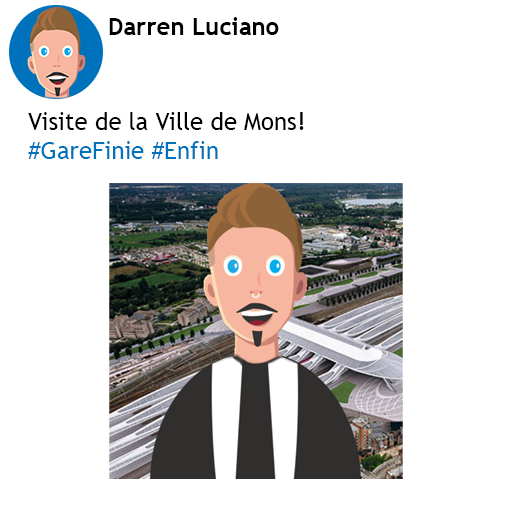
<style>
.page{position:relative;width:512px;height:512px;background:#ffffff}
.page>*{position:absolute;margin:0}
.t1{font:24px "TrebuchetMS-Bold";color:#000000}
.t2{font:24px "TrebuchetMS";color:#000000}
.t3{font:24px "TrebuchetMS";color:#0072bc}
</style>
<div class="page">
<p class="t1" style="left:109px;top:17px;width:170px;height:18px">Darren Luciano</p>
<p class="t2" style="left:28px;top:112px;width:276px;height:47px">Visite de la Ville de Mons! <br><span class="t3">#GareFinie #Enfin</span></p>
</div>
